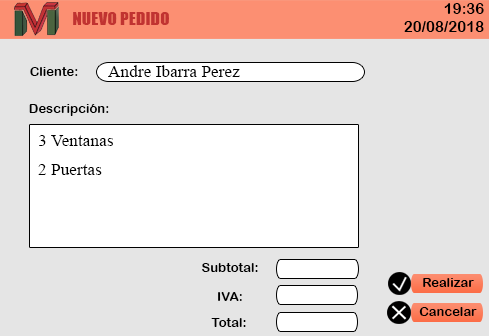
<style>
.page{position:relative;width:489px;height:336px;background:#e5e5e5}
.page>*{position:absolute;margin:0}
.t1{font:14.7px "ArialRoundedMTBold";color:#000000;scale:1.03 1}
.t2{font:17.3px "Impact";color:#c13331}
.t3{font:17.3px "TimesNewRomanPSMT";color:#000000}
.t4{font:13px "ArialRoundedMTBold";color:#000000}
</style>
<div class="page">
<p class="t1" style="left:444px;top:3px;width:40px;height:11px">19:36</p>
<p class="t2" style="left:73px;top:12px;width:96px;height:13px">NUEVO PEDIDO</p>
<p class="t1" style="left:404px;top:21px;width:80px;height:11px">20/08/2018</p>
<p class="t3" style="left:108px;top:65px;width:132px;height:12px">Andre Ibarra Perez</p>
<p class="t4" style="left:30px;top:67px;width:48px;height:9px">Cliente:</p>
<p class="t4" style="left:29px;top:104px;width:80px;height:12px">Descripción:</p>
<p class="t3" style="left:39px;top:135px;width:74px;height:11px">3 Ventanas</p>
<p class="t3" style="left:38px;top:164px;width:64px;height:11px">2 Puertas</p>
<p class="t4" style="left:202px;top:263px;width:56px;height:9px">Subtotal:</p>
<p class="t4" style="left:423px;top:278px;width:51px;height:9px">Realizar</p>
<p class="t4" style="left:218px;top:292px;width:24px;height:9px">IVA:</p>
<p class="t4" style="left:211px;top:318px;width:35px;height:9px">Total:</p>
<p class="t4" style="left:419px;top:307px;width:58px;height:9px">Cancelar</p>
</div>
